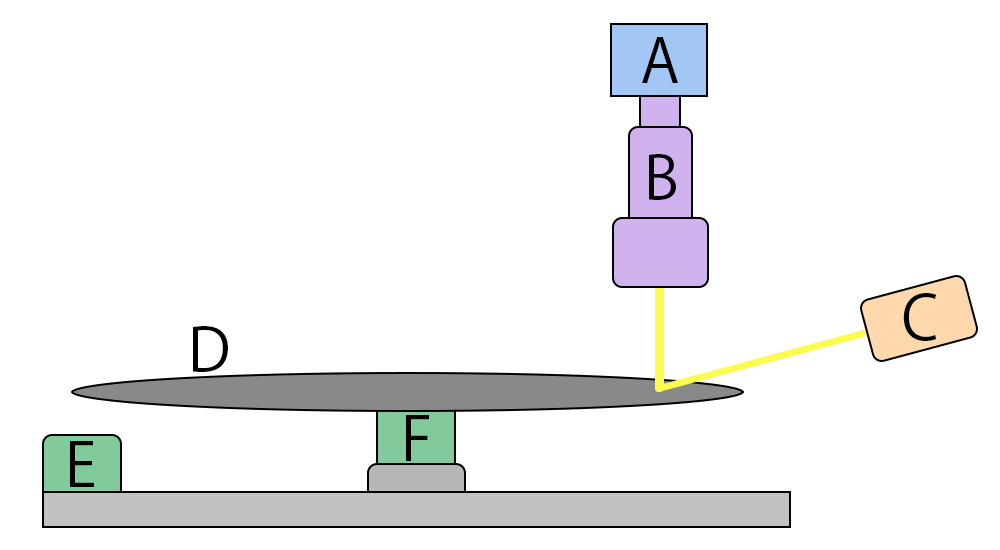
<style>
.page{position:relative;width:1000px;height:550px;background:#ffffff}
.page>*{position:absolute;margin:0}
.t1{font:60px "KozGoPr6N-Regular";color:#000000}
.t2{font:59.9px "KozGoPr6N-Regular";color:#000000}
</style>
<div class="page">
<p class="t1" style="left:642px;top:37px;width:36px;height:46px">A</p>
<p class="t1" style="left:649px;top:154px;width:27px;height:46px">B</p>
<p class="t2" style="left:903px;top:293px;width:34px;height:48px">C</p>
<p class="t2" style="left:193px;top:326px;width:35px;height:46px">D</p>
<p class="t1" style="left:406px;top:415px;width:23px;height:46px">F</p>
<p class="t1" style="left:70px;top:441px;width:24px;height:46px">E</p>
</div>
